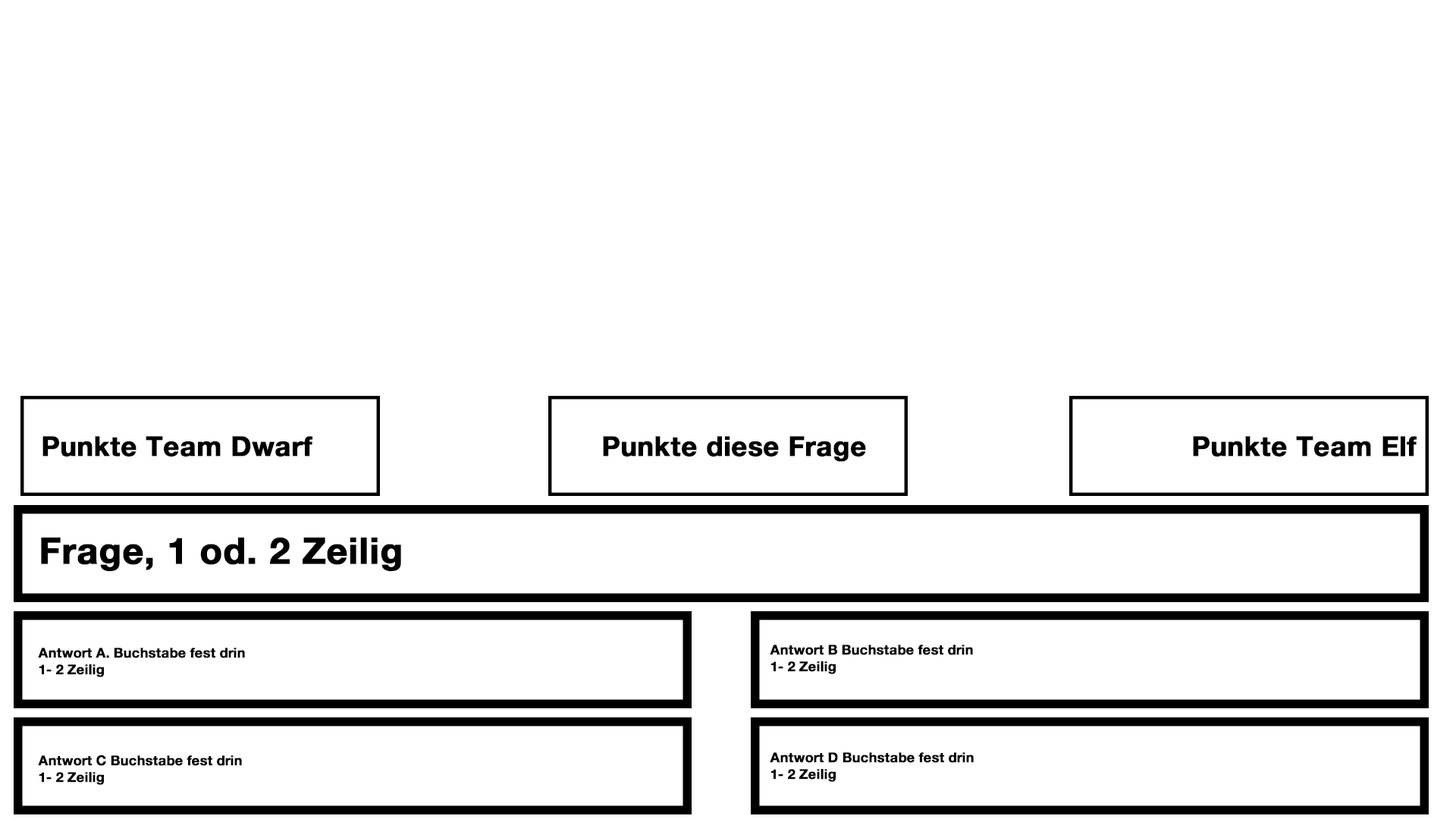
<style>
.page{position:relative;width:1456px;height:819px;background:#ffffff}
.page>*{position:absolute;margin:0}
.t1{font:27.3px "HelveticaNeueBold";color:#000000;font-weight:bold}
.t2{font:36.4px "HelveticaNeueBold";color:#000000;font-weight:bold}
.t3{font:13.6px "HelveticaNeueBold";color:#000000;font-weight:bold}
</style>
<div class="page">
<p class="t1" style="left:42px;top:436px;width:270px;height:21px">Punkte Team Dwarf</p>
<p class="t1" style="left:603px;top:436px;width:263px;height:26px">Punkte diese Frage</p>
<p class="t1" style="left:1193px;top:436px;width:224px;height:21px">Punkte Team Elf</p>
<p class="t2" style="left:41px;top:537px;width:360px;height:35px">Frage, 1 od. 2 Zeilig</p>
<p class="t3" style="left:38px;top:648px;width:207px;height:29px">Antwort A. Buchstabe fest drin<br>1- 2 Zeilig</p>
<p class="t3" style="left:770px;top:645px;width:203px;height:29px">Antwort B Buchstabe fest drin<br>1- 2 Zeilig</p>
<p class="t3" style="left:38px;top:755px;width:204px;height:30px">Antwort C Buchstabe fest drin<br>1- 2 Zeilig</p>
<p class="t3" style="left:770px;top:752px;width:204px;height:30px">Antwort D Buchstabe fest drin<br>1- 2 Zeilig</p>
</div>
